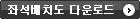
<style>
.page{position:relative;width:140px;height:19px;background:#333333}
.page>*{position:absolute;margin:0}
.t1{font:11px "Dotum";letter-spacing:-0.05em;color:#ffffff;font-weight:bold}
</style>
<div class="page">
<p class="t1" style="left:8px;top:5px;width:106px;height:10px">좌석배치도 다운로드</p>
</div>
